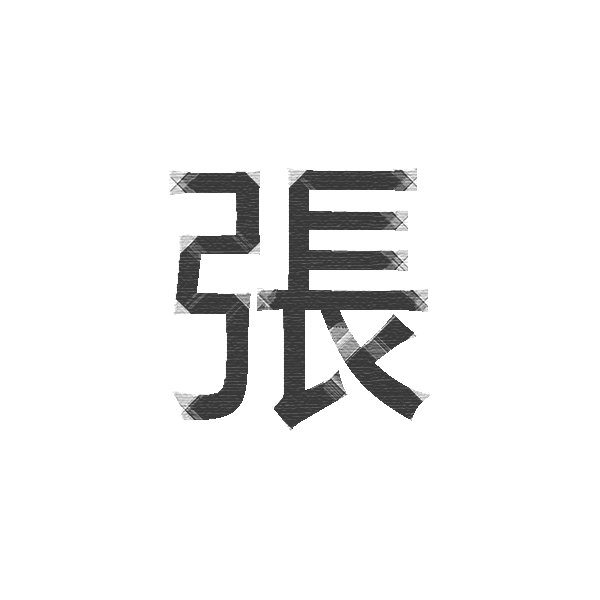
<style>
.page{position:relative;width:600px;height:600px;background:#ffffff}
.page>*{position:absolute;margin:0}
.t1{font:302px "AdobeHeitiStd-Regular";color:#393839;text-transform:uppercase}
</style>
<div class="page">
<p class="t1" style="left:169px;top:168px;width:263px;height:263px">張</p>
</div>
